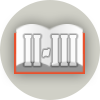
<style>
.page{position:relative;width:100px;height:100px}
.page>*{position:absolute;margin:0}
.t1{font:39px "BernardMT-Condensed";letter-spacing:0.04em;color:#fefefe;scale:0.69 1}
</style>
<div class="page">
<p class="t1" style="left:24px;top:35px;width:53px;height:31px">II-III</p>
</div>
